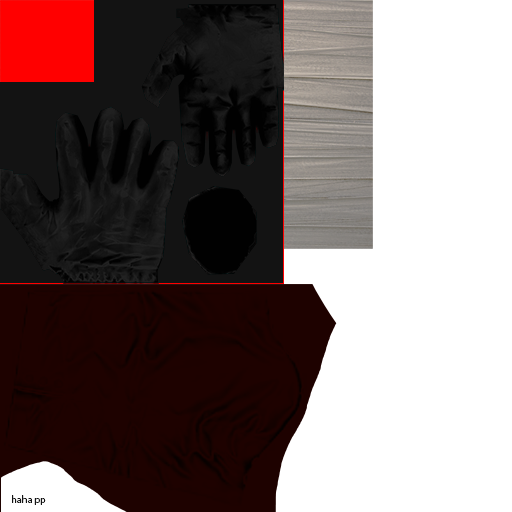
<style>
.page{position:relative;width:512px;height:512px;background:#ffffff}
.page>*{position:absolute;margin:0}
.t1{font:10px "MyriadPro-Regular";color:#131313}
</style>
<div class="page">
<p class="t1" style="left:12px;top:495px;width:34px;height:10px">haha pp</p>
</div>
